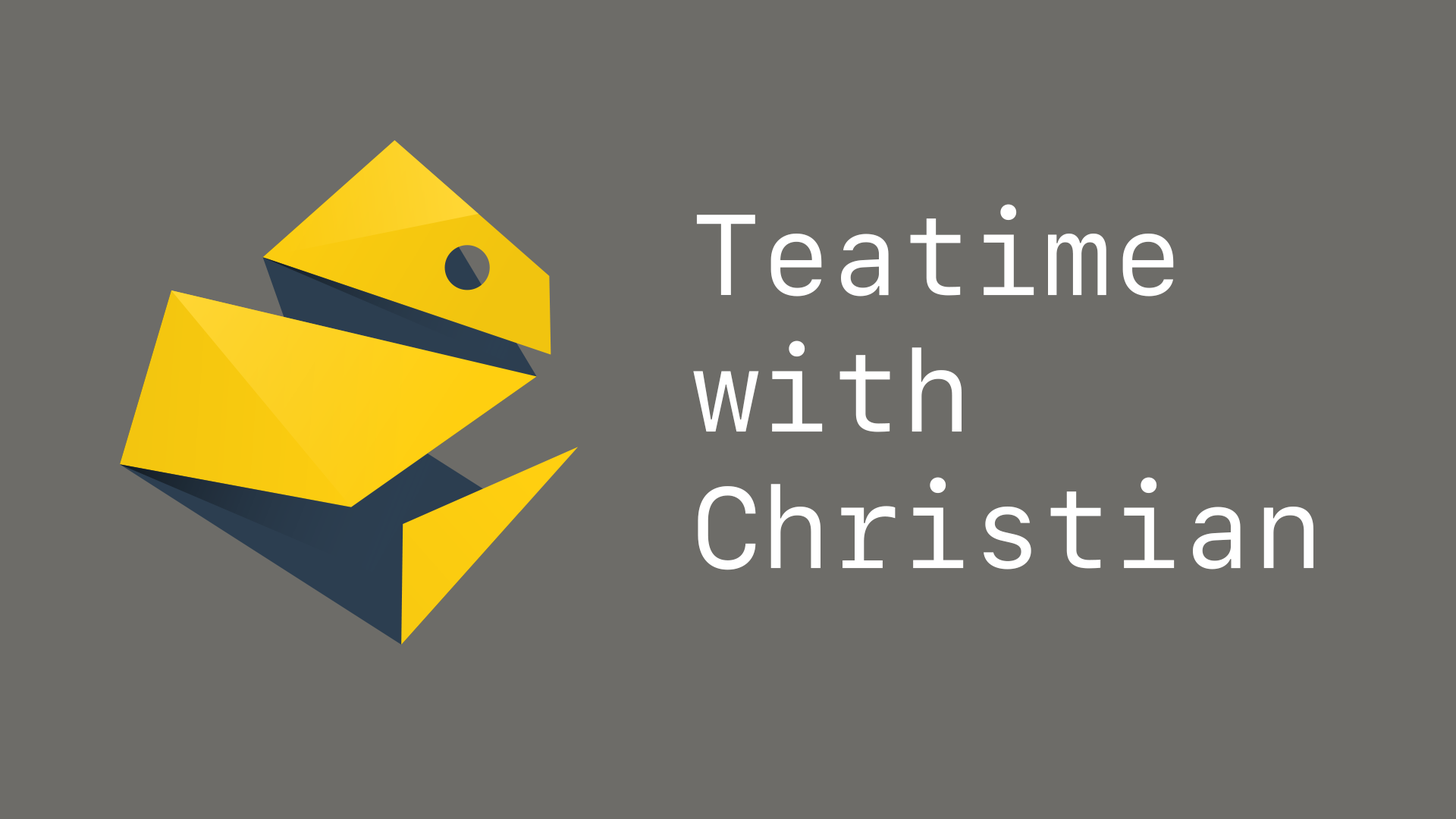
<style>
.page{position:relative;width:1456px;height:819px;background:#6d6c68}
.page>*{position:absolute;margin:0}
.t1{font:113.7px "SFMono-Regular";color:#ffffff}
</style>
<div class="page">
<p class="t1" style="left:693px;top:204px;width:620px;height:366px">Teatime<br>with<br>Christian</p>
</div>
